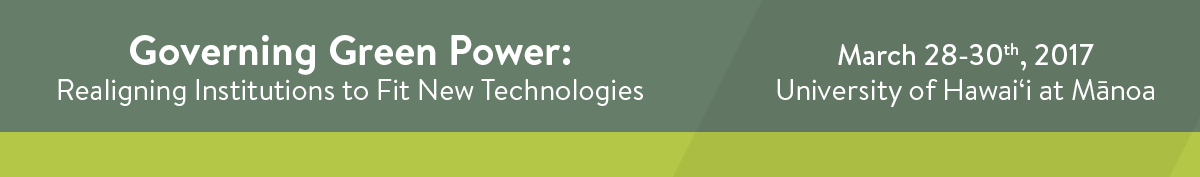
<style>
.page{position:relative;width:1200px;height:177px;background:#667d69}
.page>*{position:absolute;margin:0}
.t1{font:29.2px "BrandonText-Regular";color:#ffffff}
.t2{font:41.7px "BrandonText-Bold";color:#ffffff}
.t3{font:29.2px "BrandonText-Medium";color:#ffffff}
</style>
<div class="page">
<p class="t1" style="left:58px;top:35px;width:585px;height:71px;text-align:center"><span class="t2">Governing Green Power:<br></span>Realigning Institutions to Fit New Technologies</p>
<p class="t1" style="left:777px;top:43px;width:377px;height:64px;text-align:center"><span class="t3">March 28-30th, 2017<br></span>University of Hawai‘i at Mānoa</p>
</div>
